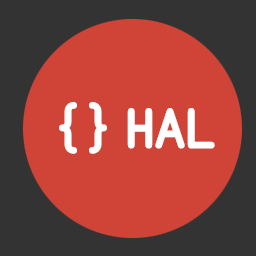
<style>
.page{position:relative;width:256px;height:256px;background:#d04437}
.page>*{position:absolute;margin:0}
.t1{font:60px "MonofurboldForPowerline";color:#ffffff}
</style>
<div class="page">
<p class="t1" style="left:59px;top:102px;width:48px;height:52px">{}</p>
<p class="t1" style="left:127px;top:108px;width:88px;height:41px">HAL</p>
</div>
